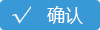
<style>
.page{position:relative;width:100px;height:30px;background:#3998d6}
.page>*{position:absolute;margin:0}
.t1{font:20px "AdobeHeitiStd-Regular";color:#ffffff}
.t2{font:18px "MicrosoftYaHei";color:#ffffff}
</style>
<div class="page">
<p class="t1" style="left:12px;top:6px;width:19px;height:18px">√</p>
<p class="t2" style="left:47px;top:6px;width:36px;height:18px">确认</p>
</div>
